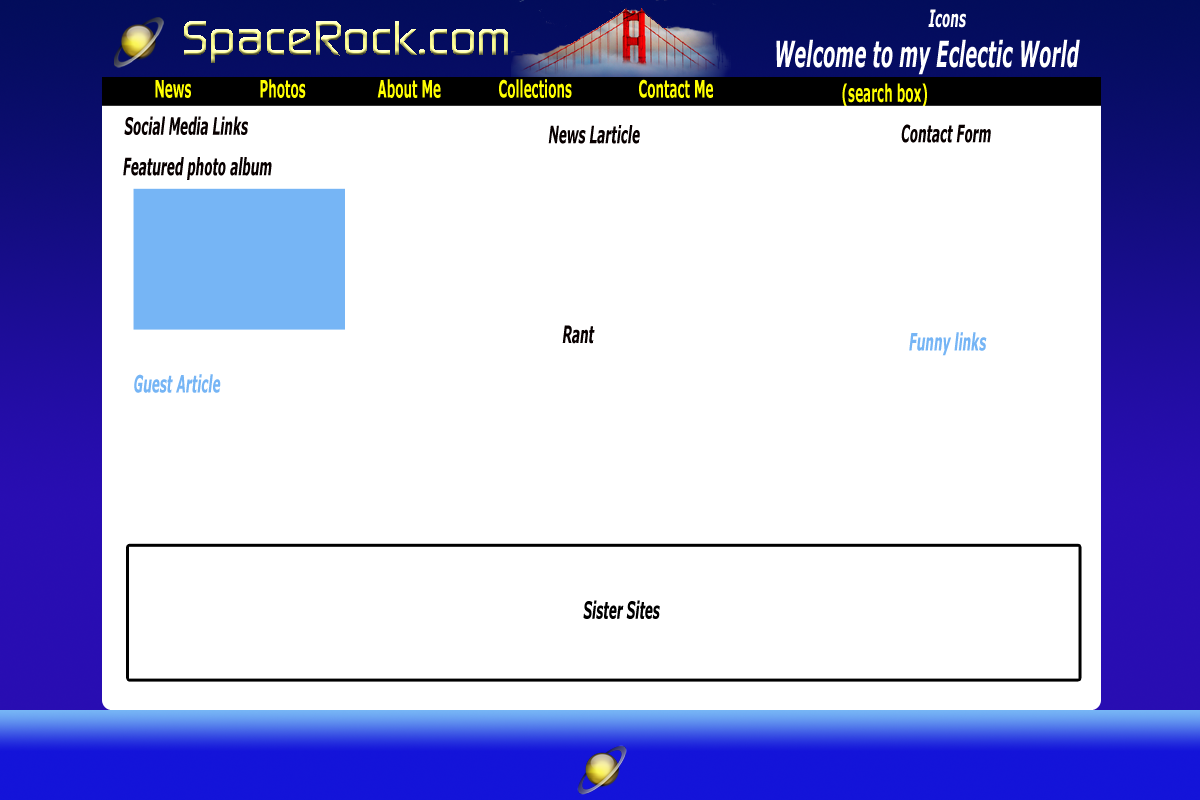
<style>
.page{position:relative;width:1200px;height:800px;background:#ffffff}
.page>*{position:absolute;margin:0}
.t1{font:24px "Verdana-BoldItalic";color:#ffffff;scale:0.5 1}
.t2{font:36px "Verdana-BoldItalic";color:#ffffff;scale:0.5 1}
.t3{font:24px "Verdana-Bold";color:#ffff00;scale:0.5 1}
.t4{font:24px "Verdana-BoldItalic";color:#080000;scale:0.5 1}
.t5{font:24px "Verdana-BoldItalic";color:#76b5f5;scale:0.5 1}
.t6{font:24px "Verdana-BoldItalic";color:#000000;scale:0.5 1}
</style>
<div class="page">
<p class="t1" style="left:928px;top:9px;width:38px;height:19px">Icons</p>
<p class="t2" style="left:776px;top:39px;width:304px;height:36px">Welcome to my Eclectic World</p>
<p class="t3" style="left:155px;top:80px;width:36px;height:18px">News</p>
<p class="t3" style="left:260px;top:79px;width:46px;height:19px">Photos</p>
<p class="t3" style="left:377px;top:79px;width:64px;height:19px">About Me</p>
<p class="t3" style="left:499px;top:79px;width:73px;height:19px">Collections</p>
<p class="t3" style="left:639px;top:79px;width:74px;height:19px">Contact Me</p>
<p class="t3" style="left:842px;top:83px;width:85px;height:24px">(search box)</p>
<p class="t4" style="left:124px;top:116px;width:124px;height:19px">Social Media Links</p>
<p class="t4" style="left:548px;top:125px;width:92px;height:19px">News Larticle</p>
<p class="t4" style="left:901px;top:124px;width:90px;height:19px">Contact Form</p>
<p class="t4" style="left:123px;top:157px;width:149px;height:23px">Featured photo album</p>
<p class="t4" style="left:562px;top:325px;width:33px;height:19px">Rant</p>
<p class="t5" style="left:909px;top:332px;width:78px;height:24px">Funny links</p>
<p class="t5" style="left:134px;top:374px;width:87px;height:19px">Guest Article</p>
<p class="t6" style="left:583px;top:600px;width:77px;height:19px">Sister Sites</p>
</div>
